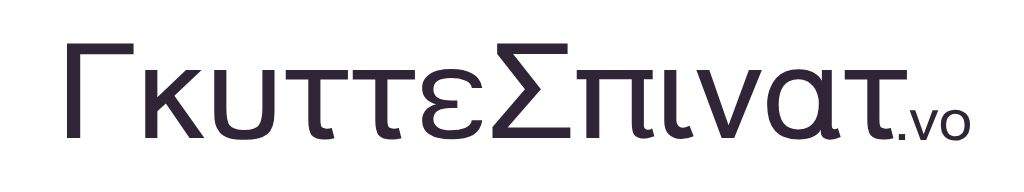
<style>
.page{position:relative;width:1024px;height:192px;background:#ffffff}
.page>*{position:absolute;margin:0}
.t1{font:129.7px "FreeSans";color:#302536;scale:1.06 1}
.t2{font:56.8px "FreeSans";color:#302536;scale:1.06 1}
</style>
<div class="page">
<p class="t1" style="left:67px;top:43px;width:840px;height:97px">ΓκυττεΣπινατ</p>
<p class="t2" style="left:898px;top:109px;width:72px;height:32px">.νο</p>
</div>
